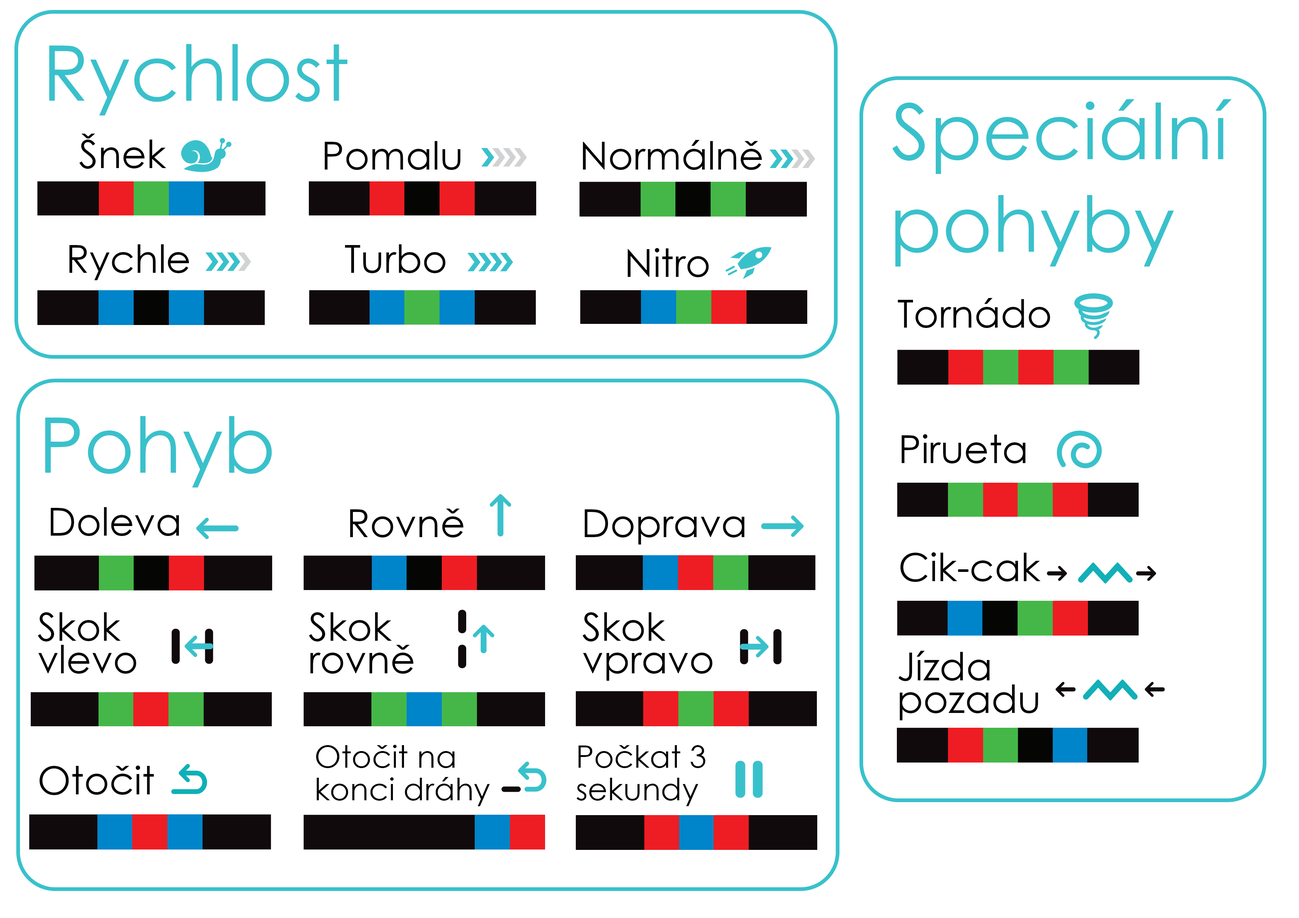
<style>
.page{position:relative;width:1299px;height:918px;background:#ffffff}
.page>*{position:absolute;margin:0}
.t1{font:77.1px "CenturyGothic";color:#39c1cb}
.t2{font:38.6px "CenturyGothic";color:#010101}
.t3{font:38.6px/32.4px "CenturyGothic";color:#010101}
.t4{font:30.9px/32.4px "CenturyGothic";color:#010101}
</style>
<div class="page">
<p class="t1" style="left:49px;top:44px;width:299px;height:72px">Rychlost</p>
<p class="t1" style="left:892px;top:99px;width:340px;height:168px">Speciální pohyby</p>
<p class="t2" style="left:79px;top:134px;width:87px;height:35px">Šnek</p>
<p class="t2" style="left:325px;top:141px;width:136px;height:29px">Pomalu</p>
<p class="t2" style="left:583px;top:140px;width:179px;height:30px">Normálně</p>
<p class="t2" style="left:69px;top:244px;width:120px;height:36px">Rychle</p>
<p class="t2" style="left:345px;top:244px;width:100px;height:29px">Turbo</p>
<p class="t2" style="left:628px;top:248px;width:81px;height:29px">Nitro</p>
<p class="t2" style="left:897px;top:298px;width:153px;height:30px">Tornádo</p>
<p class="t1" style="left:45px;top:416px;width:227px;height:72px">Pohyb</p>
<p class="t2" style="left:901px;top:434px;width:125px;height:30px">Pirueta</p>
<p class="t2" style="left:51px;top:507px;width:128px;height:29px">Doleva</p>
<p class="t2" style="left:350px;top:509px;width:114px;height:29px">Rovně</p>
<p class="t2" style="left:585px;top:509px;width:160px;height:36px">Doprava</p>
<p class="t2" style="left:900px;top:552px;width:140px;height:30px">Cik-cak</p>
<p class="t3" style="left:38px;top:612px;width:98px;height:62px">Skok <br>vlevo</p>
<p class="t3" style="left:309px;top:612px;width:105px;height:62px">Skok <br>rovně</p>
<p class="t3" style="left:582px;top:612px;width:130px;height:69px">Skok <br>vpravo</p>
<p class="t3" style="left:898px;top:651px;width:140px;height:69px">Jízda pozadu</p>
<p class="t4" style="left:316px;top:745px;width:174px;height:61px">Otočit na konci dráhy</p>
<p class="t4" style="left:576px;top:745px;width:129px;height:61px">Počkat 3 sekundy</p>
<p class="t2" style="left:39px;top:766px;width:115px;height:29px">Otočit</p>
</div>
